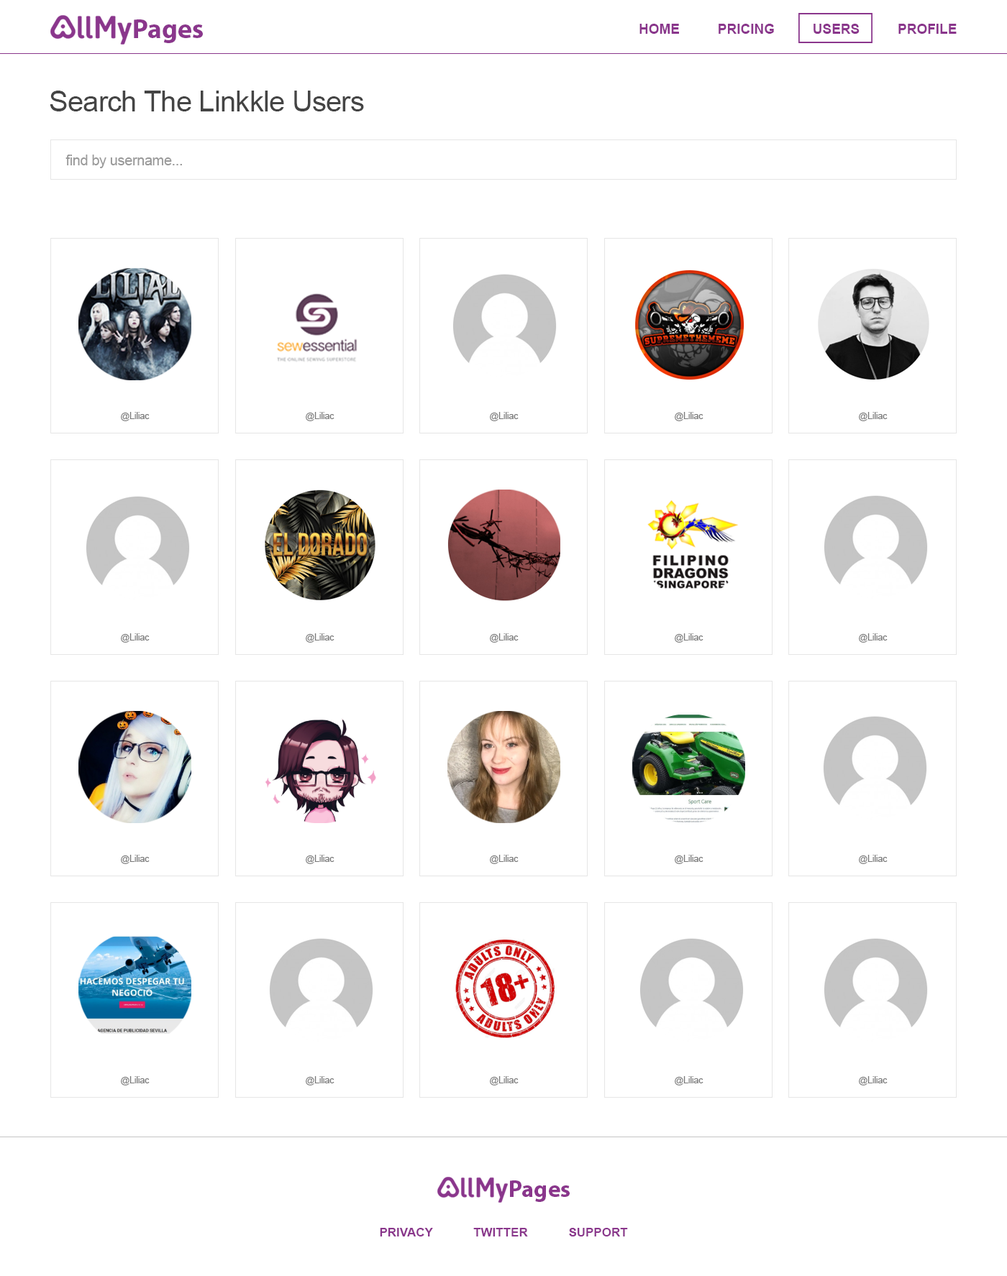
<style>
.page{position:relative;width:1007px;height:1276px;background:#ffffff}
.page>*{position:absolute;margin:0}
.t1{font:27.2px "MyriadPro-Bold";color:#8a368c}
.t2{font:13.7px "Arial-BoldMT";color:#8a368c}
.t3{font:28.8px "ArialMT";letter-spacing:-0.02em;color:#444444}
.t4{font:14.4px "ArialMT";letter-spacing:-0.02em;color:#9a9a9a}
.t5{font:9px "ArialMT";letter-spacing:-0.02em;color:#797979}
.t6{font:23.8px "MyriadPro-Bold";color:#8a368c}
.t7{font:12.2px "Arial-BoldMT";color:#8a368c}
</style>
<div class="page">
<p class="t1" style="left:134px;top:19px;width:69px;height:24px">Pages</p>
<p class="t2" style="left:639px;top:24px;width:317px;height:10px">HOME          PRICING          USERS          PROFILE</p>
<p class="t3" style="left:50px;top:91px;width:314px;height:20px">Search The Linkkle Users</p>
<p class="t4" style="left:65px;top:155px;width:117px;height:13px">find by username...</p>
<p class="t5" style="left:121px;top:412px;width:29px;height:9px">@Liliac</p>
<p class="t5" style="left:306px;top:412px;width:28px;height:9px">@Liliac</p>
<p class="t5" style="left:490px;top:412px;width:28px;height:9px">@Liliac</p>
<p class="t5" style="left:675px;top:412px;width:28px;height:9px">@Liliac</p>
<p class="t5" style="left:859px;top:412px;width:28px;height:9px">@Liliac</p>
<p class="t5" style="left:121px;top:634px;width:29px;height:9px">@Liliac</p>
<p class="t5" style="left:306px;top:634px;width:28px;height:9px">@Liliac</p>
<p class="t5" style="left:490px;top:634px;width:28px;height:9px">@Liliac</p>
<p class="t5" style="left:675px;top:634px;width:28px;height:9px">@Liliac</p>
<p class="t5" style="left:859px;top:634px;width:28px;height:9px">@Liliac</p>
<p class="t5" style="left:121px;top:855px;width:29px;height:9px">@Liliac</p>
<p class="t5" style="left:306px;top:855px;width:28px;height:9px">@Liliac</p>
<p class="t5" style="left:490px;top:855px;width:28px;height:9px">@Liliac</p>
<p class="t5" style="left:675px;top:855px;width:28px;height:9px">@Liliac</p>
<p class="t5" style="left:859px;top:855px;width:28px;height:9px">@Liliac</p>
<p class="t5" style="left:121px;top:1077px;width:29px;height:9px">@Liliac</p>
<p class="t5" style="left:306px;top:1077px;width:28px;height:9px">@Liliac</p>
<p class="t5" style="left:490px;top:1077px;width:28px;height:9px">@Liliac</p>
<p class="t5" style="left:675px;top:1077px;width:28px;height:9px">@Liliac</p>
<p class="t5" style="left:859px;top:1077px;width:28px;height:9px">@Liliac</p>
<p class="t6" style="left:510px;top:1181px;width:60px;height:21px">Pages</p>
<p class="t7" style="left:380px;top:1228px;width:248px;height:9px">PRIVACY            TWITTER            SUPPORT</p>
</div>
